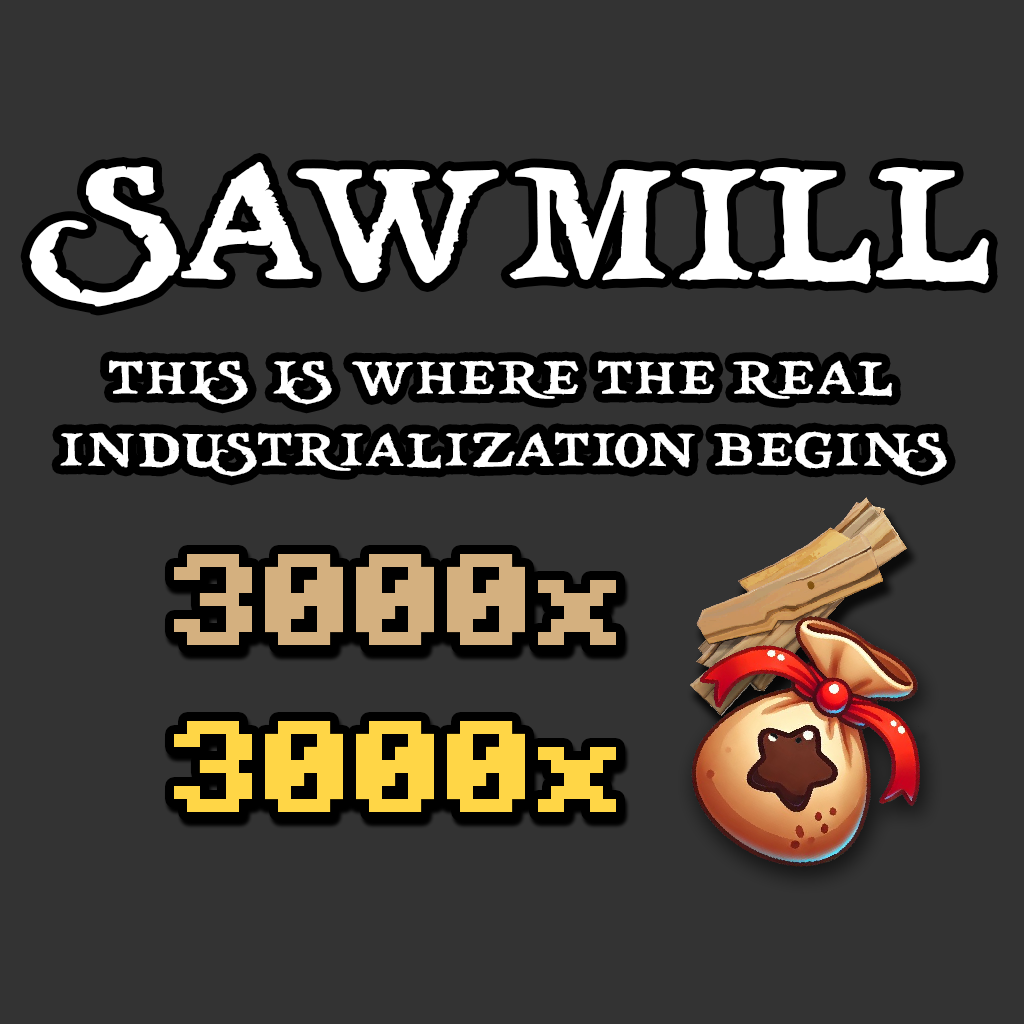
<style>
.page{position:relative;width:1024px;height:1024px;background:#333333}
.page>*{position:absolute;margin:0}
.t1{font:157.7px "treasuremap";color:#ffffff}
.t2{font:60px "treasuremap";color:#ffffff}
.t3{font:130px "Minecraft-Bold";color:#d4b07f}
.t4{font:130px "Minecraft-Bold";color:#ffd646}
</style>
<div class="page">
<p class="t1" style="left:29px;top:162px;width:960px;height:145px">SAWMILL</p>
<p class="t2" style="left:60px;top:360px;width:887px;height:117px;text-align:center">this is where the real<br>industrialization begins</p>
<p class="t3" style="left:174px;top:554px;width:442px;height:91px">3000x</p>
<p class="t4" style="left:174px;top:721px;width:442px;height:91px">3000x</p>
</div>
